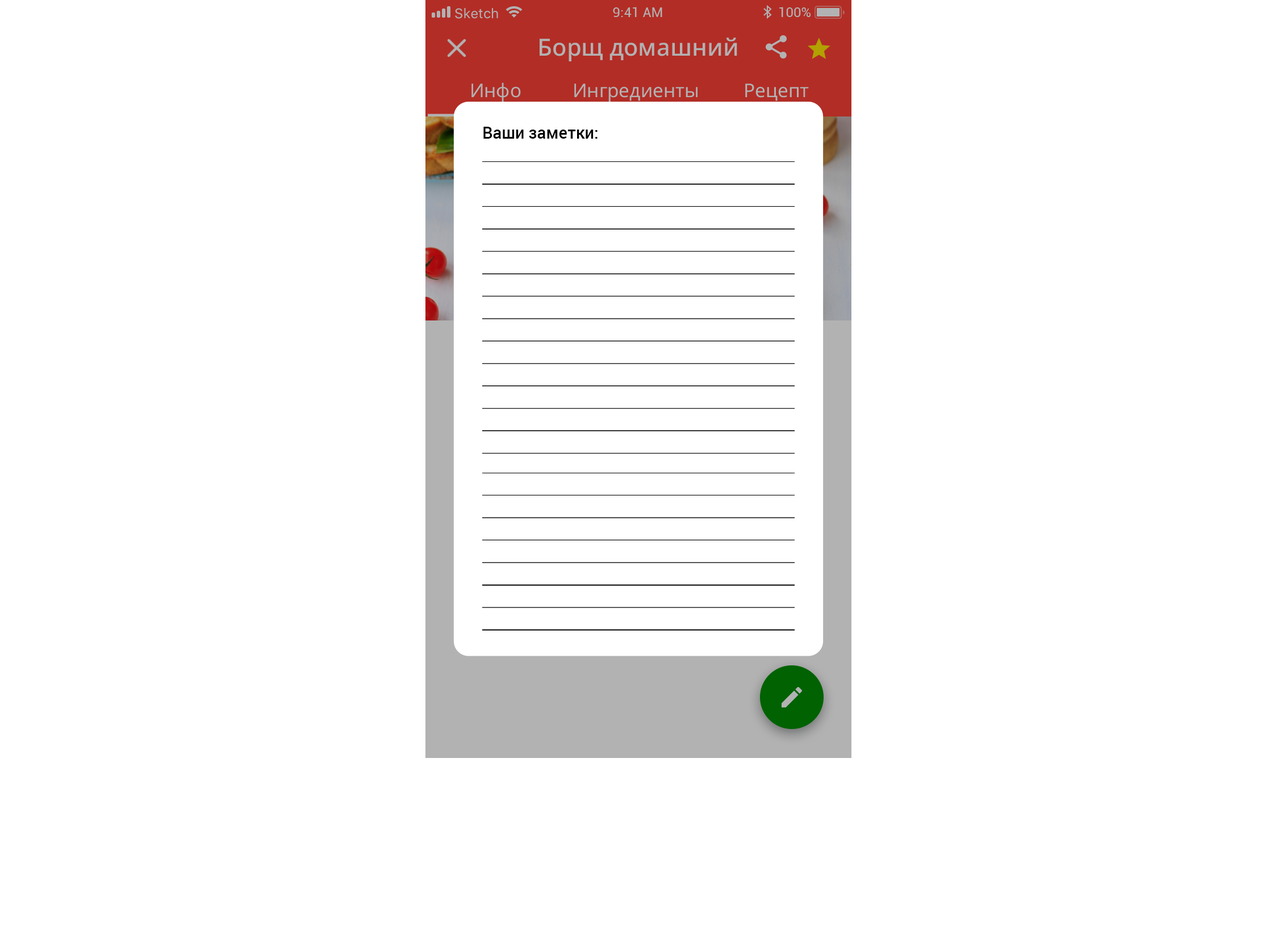
<style>
.page{position:relative;width:1278px;height:933px;background:#ffffff}
.page>*{position:absolute;margin:0}
.t1{font:23.7px "NotoSans-Medium";color:#b2b2b2}
.t2{font:18.9px "NotoSans-Regular";color:#b2b2b2}
.t3{font:16.5px "Roboto-Medium";color:#000000}
</style>
<div class="page">
<p class="t1" style="left:540px;top:37px;width:197px;height:24px">Борщ домашний</p>
<p class="t2" style="left:472px;top:82px;width:49px;height:20px">Инфо</p>
<p class="t2" style="left:574px;top:84px;width:124px;height:18px">Ингредиенты</p>
<p class="t2" style="left:745px;top:84px;width:64px;height:17px">Рецепт</p>
<p class="t3" style="left:483px;top:127px;width:115px;height:12px">Ваши заметки:</p>
</div>
